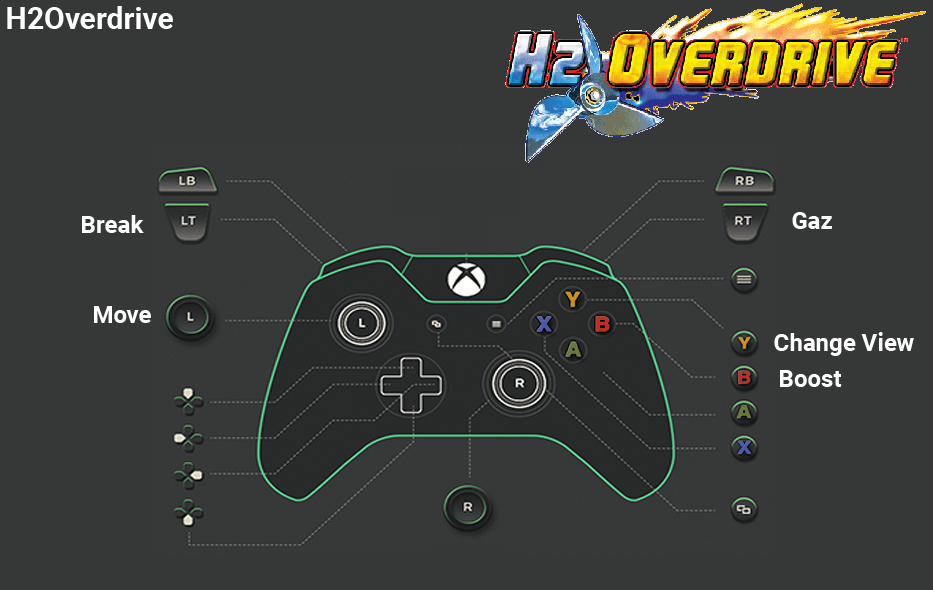
<style>
.page{position:relative;width:933px;height:590px;background:#363838}
.page>*{position:absolute;margin:0}
.t1{font:30px "Roboto-Bold";color:#ffffff}
.t2{font:24px "Roboto-Bold";color:#ffffff}
</style>
<div class="page">
<p class="t1" style="left:7px;top:6px;width:166px;height:23px">H2Overdrive</p>
<p class="t2" style="left:82px;top:215px;width:62px;height:18px">Break</p>
<p class="t2" style="left:792px;top:212px;width:40px;height:17px">Gaz</p>
<p class="t2" style="left:94px;top:306px;width:57px;height:17px">Move</p>
<p class="t2" style="left:774px;top:332px;width:140px;height:24px">Change View</p>
<p class="t2" style="left:780px;top:370px;width:62px;height:17px">Boost</p>
</div>
